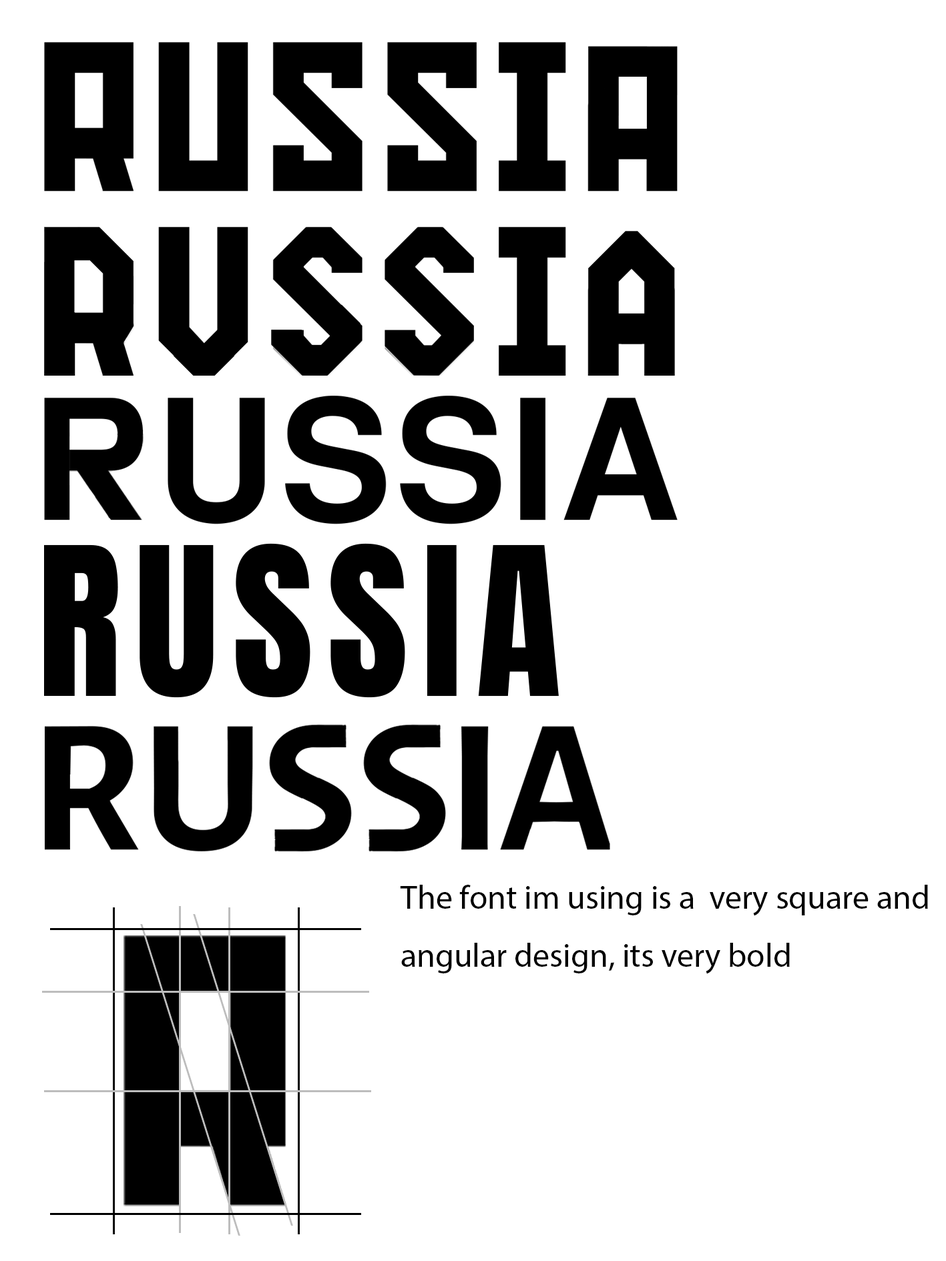
<style>
.page{position:relative;width:946px;height:1261px;background:#ffffff}
.page>*{position:absolute;margin:0}
.t1{font:175.3px "Anton-Regular";letter-spacing:0.08em;color:#000000}
.t2{font:33.4px "MyriadPro-Regular";color:#000000}
</style>
<div class="page">
<p class="t1" style="left:44px;top:543px;width:515px;height:155px">RUSSIA</p>
<p class="t2" style="left:400px;top:885px;width:528px;height:89px">The font im using is a  very square and<br>angular design, its very bold</p>
</div>
